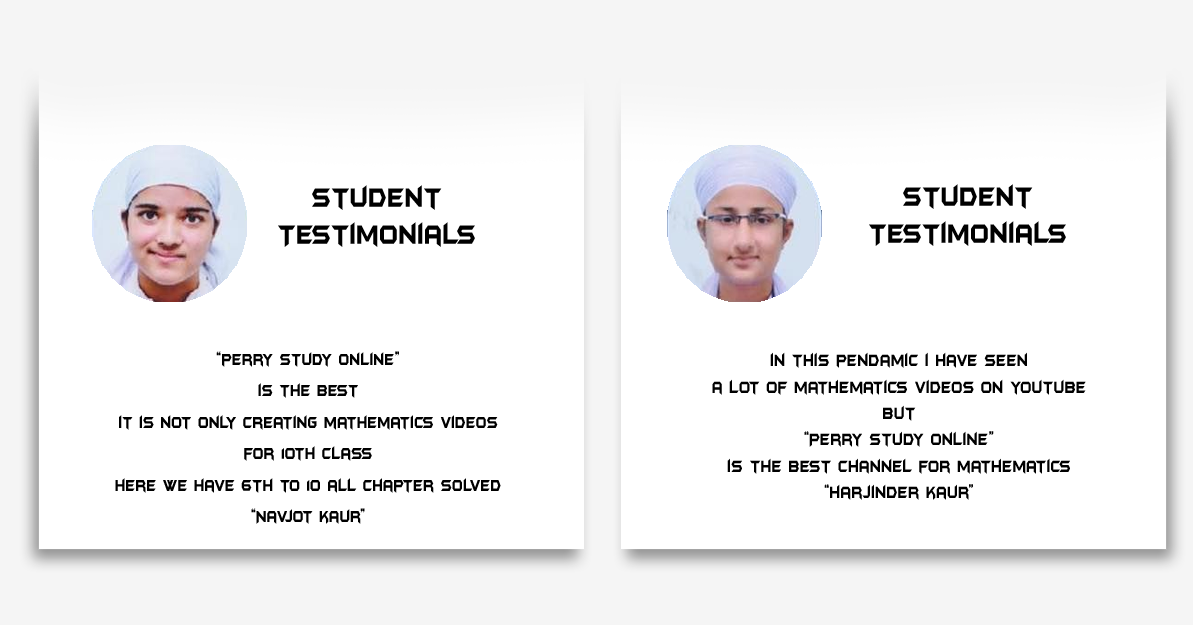
<style>
.page{position:relative;width:1193px;height:625px;background:#ffffff}
.page>*{position:absolute;margin:0}
.t1{font:31px "BatmanForeverAlternate";color:#000000;scale:0.71 1}
.t2{font:18.3px/31.5px "BatmanForeverAlternate";color:#000000;scale:0.69 1}
.t3{font:18.9px/26.4px "BatmanForeverAlternate";color:#000000;scale:0.69 1}
</style>
<div class="page">
<p class="t1" style="left:278px;top:185px;width:197px;height:62px;text-align:center">Student<br>Testimonials</p>
<p class="t1" style="left:869px;top:184px;width:197px;height:62px;text-align:center">Student<br>Testimonials</p>
<p class="t2" style="left:115px;top:351px;width:386px;height:173px;text-align:center">“perry study online”<br>is the best<br>it is not only creating mathematics videos<br>for 10th class<br>here we have 6th to 10 all chapter solved<br>“Navjot kaur”</p>
<p class="t3" style="left:712px;top:352px;width:374px;height:148px;text-align:center">in this pendamic i have seen<br>a lot of mathematics videos on youtube<br>but<br>“Perry study online”<br>is the best channel for mathematics<br>“harjinder kaur”</p>
</div>
